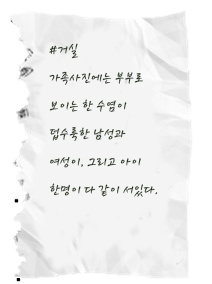
<style>
.page{position:relative;width:212px;height:284px;background:#f4f4f4}
.page>*{position:absolute;margin:0}
.t1{font:12px "TypoPapyrusB";color:#273621}
</style>
<div class="page">
<p class="t1" style="left:49px;top:43px;width:109px;height:154px">#거실 <br>가족사진에는 부부로 보이는 한 수염이 덥수룩한 남성과 여성이, 그리고 아이 한명이 다 같이 서있다. 무표정한 가족사진이다.</p>
</div>
